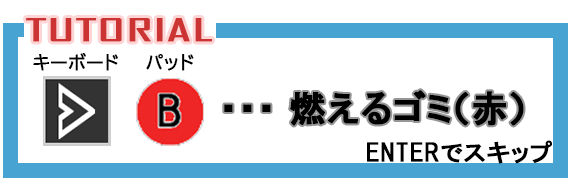
<style>
.page{position:relative;width:570px;height:180px;background:#ffffff}
.page>*{position:absolute;margin:0}
.t1{font:30px "AgencyFB-Reg";color:#cc3333;font-weight:bold;scale:2 1}
.t2{font:18px "BIZ-UDPGothic";color:#000000;font-weight:bold}
.t3{font:36px "HGPGothicE";color:#000000;font-weight:bold}
.t4{font:24px "HGPGothicE";color:#000000;font-weight:bold}
</style>
<div class="page">
<p class="t1" style="left:26px;top:18px;width:186px;height:24px">TUTORIAL</p>
<p class="t2" style="left:33px;top:53px;width:85px;height:18px">キーボード</p>
<p class="t2" style="left:146px;top:54px;width:48px;height:17px">パッド</p>
<p class="t3" style="left:224px;top:90px;width:300px;height:36px">・・・ 燃えるゴミ（赤）</p>
<p class="t4" style="left:367px;top:140px;width:185px;height:24px">ENTERでスキップ</p>
</div>
